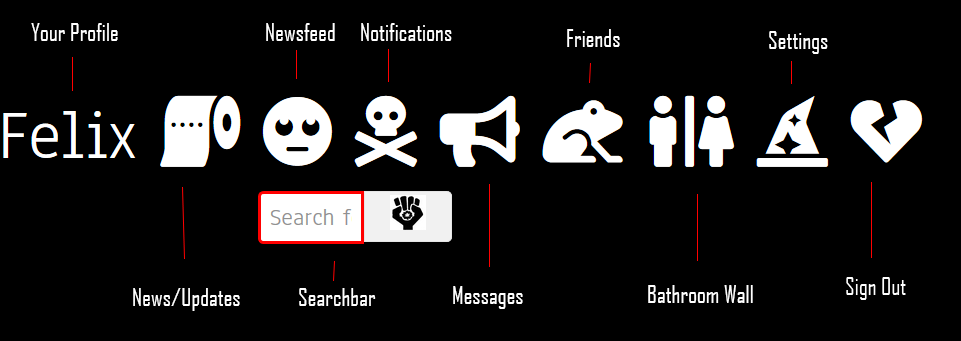
<style>
.page{position:relative;width:961px;height:341px;background:#000000}
.page>*{position:absolute;margin:0}
.t1{font:23.3px "AgencyFB-Reg";color:#ffffff}
</style>
<div class="page">
<p class="t1" style="left:31px;top:23px;width:87px;height:18px">Your Profile</p>
<p class="t1" style="left:266px;top:23px;width:69px;height:18px">Newsfeed</p>
<p class="t1" style="left:361px;top:23px;width:91px;height:18px">Notifications</p>
<p class="t1" style="left:567px;top:29px;width:53px;height:18px">Friends</p>
<p class="t1" style="left:769px;top:31px;width:59px;height:23px">Settings</p>
<p class="t1" style="left:133px;top:288px;width:107px;height:23px">News/Updates</p>
<p class="t1" style="left:299px;top:288px;width:77px;height:18px">Searchbar</p>
<p class="t1" style="left:453px;top:286px;width:70px;height:23px">Messages</p>
<p class="t1" style="left:648px;top:285px;width:105px;height:18px">Bathroom Wall</p>
</div>
